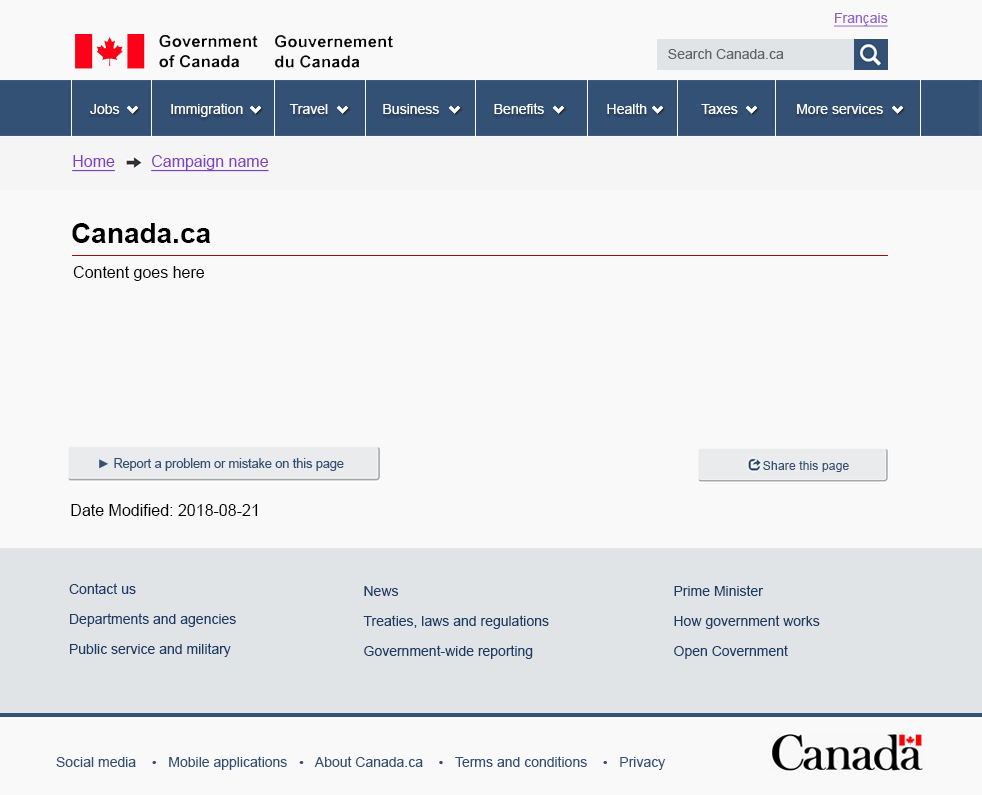
<style>
.page{position:relative;width:982px;height:795px;background:#f9f9f9}
.page>*{position:absolute;margin:0}
.t1{font:14px "ArialMT";color:#9363c8;text-decoration:underline}
.t2{font:14px "ArialMT";color:#626262}
.t3{font:14px "ArialMT";color:#ffffff}
.t4{font:16px "ArialMT";color:#8041c0;text-decoration:underline}
.t5{font:28px "Arial-BoldMT";color:#000000}
.t6{font:16px "ArialMT";color:#000000}
.t7{font:12.5px "ArialMT";color:#335075}
.t8{font:12.2px "ArialMT";color:#335075}
.t9{font:14px/30px "ArialMT";color:#1b3c65}
.t10{font:14px "ArialMT";color:#335175}
</style>
<div class="page">
<p class="t1" style="left:834px;top:13px;width:54px;height:14px">Français</p>
<p class="t2" style="left:668px;top:49px;width:116px;height:10px">Search Canada.ca</p>
<p class="t3" style="left:90px;top:103px;width:793px;height:14px">Jobs             Immigration            Travel              Business              Benefits                Health              Taxes               More services</p>
<p class="t4" style="left:72px;top:155px;width:43px;height:17px">Home</p>
<p class="t4" style="left:151px;top:155px;width:118px;height:17px">Campaign name</p>
<p class="t5" style="left:72px;top:223px;width:139px;height:20px">Canada.ca</p>
<p class="t6" style="left:73px;top:266px;width:132px;height:15px">Content goes here</p>
<p class="t7" style="left:99px;top:458px;width:245px;height:13px">► Report a problem or mistake on this page</p>
<p class="t8" style="left:763px;top:461px;width:86px;height:11px">Share this page</p>
<p class="t6" style="left:71px;top:504px;width:187px;height:12px">Date Modified: 2018-08-21</p>
<p class="t9" style="left:69px;top:583px;width:167px;height:74px">Contact us<br>Departments and agencies<br>Public service and military</p>
<p class="t9" style="left:363px;top:586px;width:186px;height:73px">News<br>Treaties, laws and regulations<br>Government-wide reporting</p>
<p class="t9" style="left:674px;top:585px;width:146px;height:74px">Prime Minister<br>How government works<br>Open Covernment</p>
<p class="t10" style="left:56px;top:756px;width:610px;height:14px">Social media    •   Mobile applications   •   About Canada.ca    •   Terms and conditions    •   Privacy</p>
</div>
